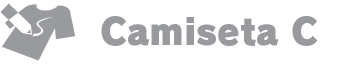
<style>
.page{position:relative;width:352px;height:64px;background:#ffffff}
.page>*{position:absolute;margin:0}
.t1{font:36px "RodinPro-UB";color:#989a9d}
</style>
<div class="page">
<p class="t1" style="left:101px;top:16px;width:217px;height:30px">Camiseta C</p>
</div>
